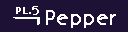
<style>
.page{position:relative;width:128px;height:32px;background:#1d1135}
.page>*{position:absolute;margin:0}
.t1{font:12px "BonvenoCF-Light";letter-spacing:0.005em;color:#ffffff;font-weight:bold}
.t2{font:9px "BonvenoCF-Light";letter-spacing:0.005em;color:#ffffff;font-weight:bold}
.t3{font:18px "BonvenoCF-Light";letter-spacing:0.005em;color:#ffffff;font-weight:bold}
</style>
<div class="page">
<p class="t1" style="left:32px;top:6px;width:7px;height:9px">5</p>
<p class="t2" style="left:16px;top:7px;width:15px;height:7px">PL.</p>
<p class="t3" style="left:46px;top:10px;width:70px;height:18px">Pepper</p>
</div>
